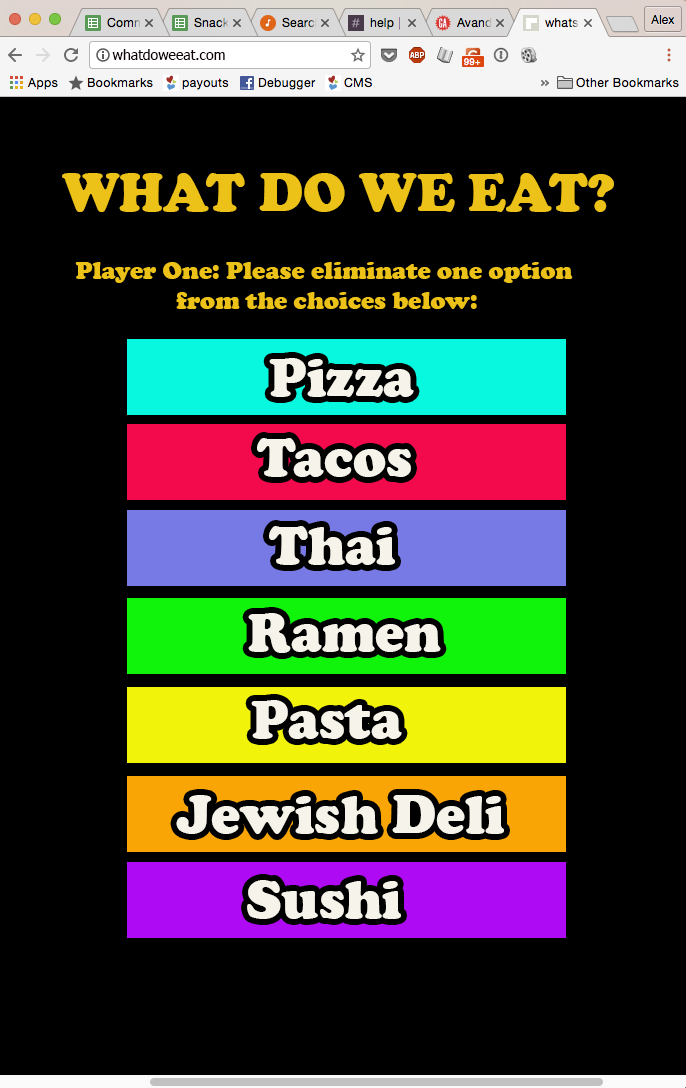
<style>
.page{position:relative;width:686px;height:1088px;background:#000000}
.page>*{position:absolute;margin:0}
.t1{font:14px "Tahoma";color:#0e0101}
.t2{font:55px "CooperBlack";color:#ecc219}
.t3{font:25px "CooperBlack";color:#ecc219}
.t4{font:55px "CooperBlack";color:#f6f4ea}
</style>
<div class="page">
<p class="t1" style="left:112px;top:49px;width:113px;height:11px">whatdoweeat.com</p>
<p class="t2" style="left:62px;top:173px;width:552px;height:39px">WHAT DO WE EAT?</p>
<p class="t3" style="left:75px;top:262px;width:498px;height:47px;text-align:center">Player One: Please eliminate one option <br>from the choices below:</p>
<p class="t4" style="left:269px;top:358px;width:145px;height:39px">Pizza</p>
<p class="t4" style="left:257px;top:438px;width:154px;height:39px">Tacos</p>
<p class="t4" style="left:269px;top:526px;width:126px;height:39px">Thai</p>
<p class="t4" style="left:248px;top:613px;width:193px;height:40px">Ramen</p>
<p class="t4" style="left:251px;top:700px;width:151px;height:39px">Pasta</p>
<p class="t4" style="left:176px;top:795px;width:328px;height:39px">Jewish Deli</p>
<p class="t4" style="left:247px;top:880px;width:154px;height:39px">Sushi</p>
</div>
